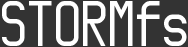
<style>
.page{position:relative;width:188px;height:47px;background:#333333}
.page>*{position:absolute;margin:0}
.t1{font:72px "Monkey";color:#ffffff}
</style>
<div class="page">
<p class="t1" style="left:2px;top:1px;width:185px;height:45px">STORMfs</p>
</div>
